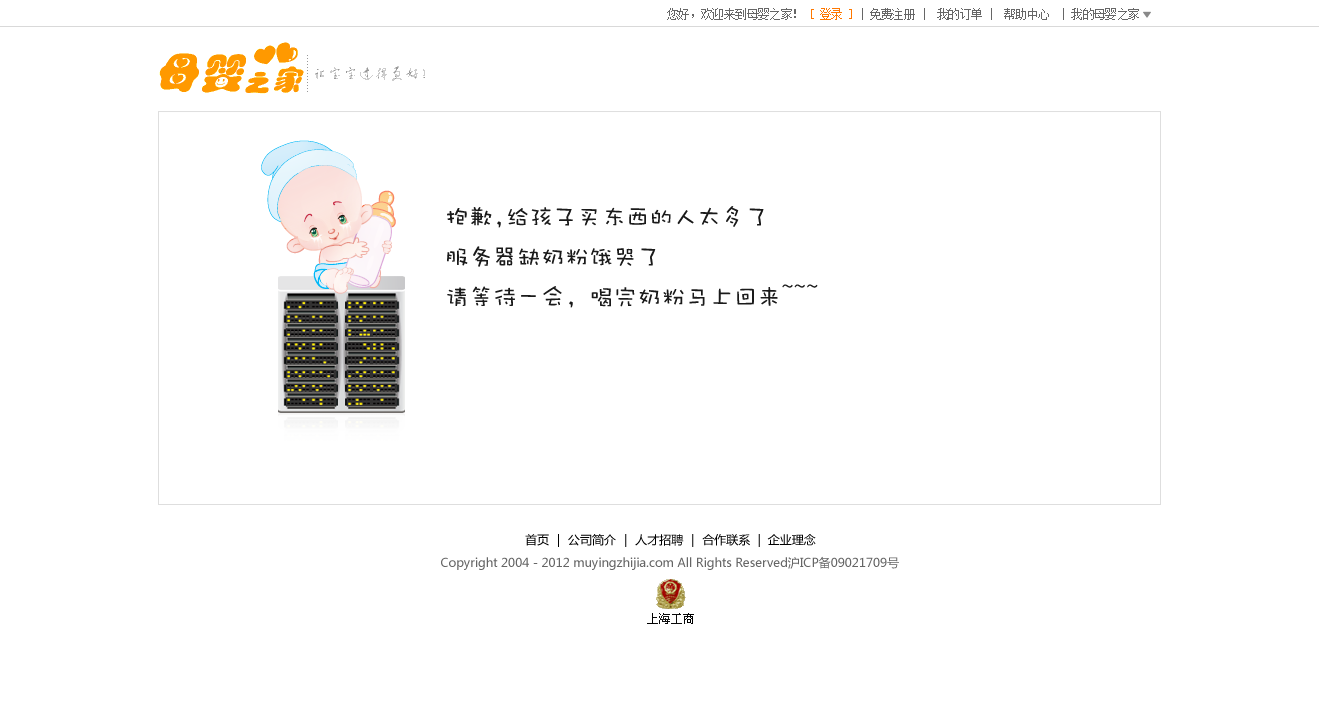
<style>
.page{position:relative;width:1319px;height:728px;background:#ffffff}
.page>*{position:absolute;margin:0}
.t1{font:12px "SimSun";letter-spacing:-0.05em;color:#666666}
.t2{font:12px "SimSun";letter-spacing:-0.05em;color:#ff7800}
.t3{font:24px/40px "DFWaWaW5";color:#1a1a1a}
.t4{font:12px "MicrosoftYaHei";color:#000000}
.t5{font:12px "MicrosoftYaHei";color:#666666}
</style>
<div class="page">
<p class="t1" style="left:667px;top:8px;width:472px;height:12px">您好，欢迎来到母婴之家！ <span class="t2">[ 登录 ]</span> | 免费注册 |  我的订单 |  帮助中心  | 我的母婴之家</p>
<p class="t3" style="left:447px;top:206px;width:371px;height:102px">抱歉,给孩子买东西的人太多了<br>服务器缺奶粉饿哭了<br>请等待一会, 喝完奶粉马上回来~~~</p>
<p class="t4" style="left:525px;top:534px;width:291px;height:13px">首页 ｜ 公司简介 ｜ 人才招聘 ｜ 合作联系  |  企业理念</p>
<p class="t5" style="left:441px;top:556px;width:458px;height:14px">Copyright 2004 - 2012 muyingzhijia.com All Rights Reserved沪ICP备09021709号</p>
</div>
